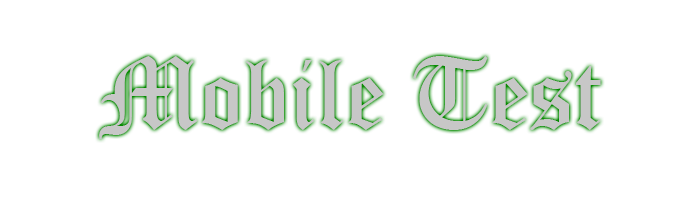
<style>
.page{position:relative;width:700px;height:200px;background:#ffffff}
.page>*{position:absolute;margin:0}
.t1{font:100px "OldEnglishTextMT";color:#c8c8c8}
</style>
<div class="page">
<p class="t1" style="left:99px;top:56px;width:502px;height:83px">Mobile Test</p>
</div>
